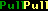
<style>
.page{position:relative;width:48px;height:11px;background:#000000}
.page>*{position:absolute;margin:0}
.t1{font:13.2px "Onesize";color:#009900;scale:0.91 1}
.t2{font:13.2px "Onesize";color:#ffff66;scale:0.91 1}
</style>
<div class="page">
<p class="t1" style="left:0px;top:1px;width:24px;height:8px">Pull</p>
<p class="t2" style="left:24px;top:1px;width:24px;height:8px">Pull</p>
</div>
